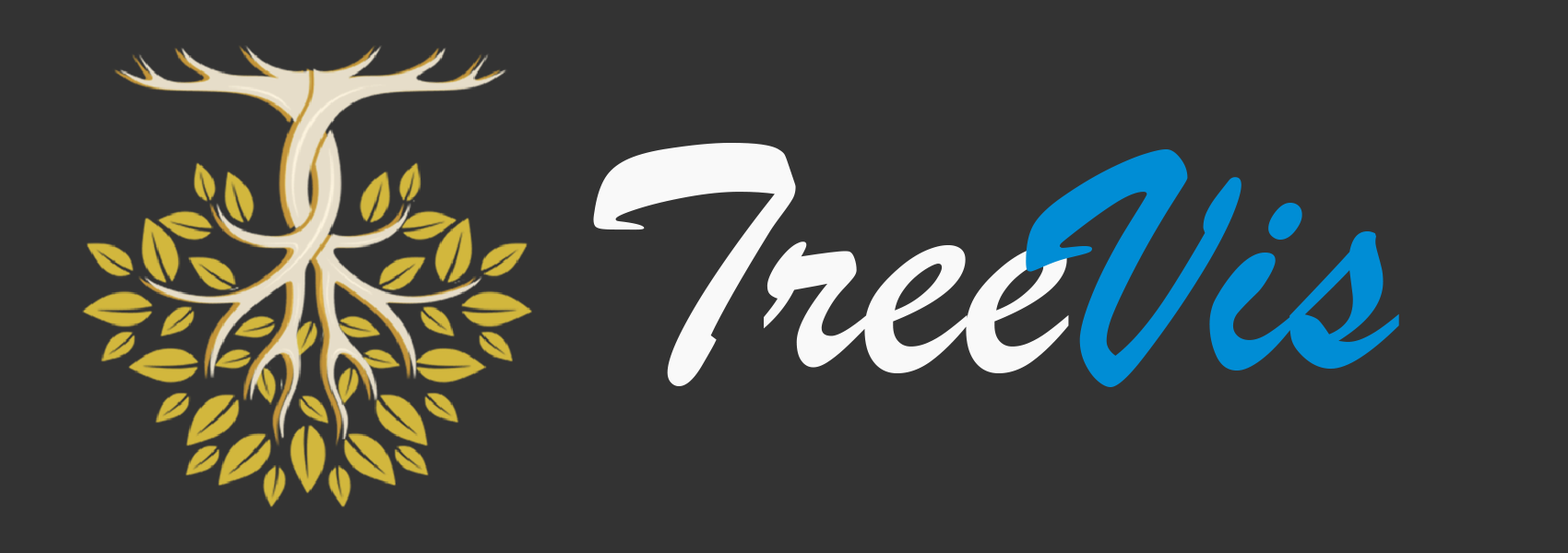
<style>
.page{position:relative;width:1568px;height:553px;background:#333333}
.page>*{position:absolute;margin:0}
.t1{font:345.9px "BrushScriptMT";color:#f9f9f9}
.t2{font:345.9px "BrushScriptMT";color:#008dd5}
</style>
<div class="page">
<p class="t1" style="left:593px;top:143px;width:806px;height:244px">Tree<span class="t2">Vis</span></p>
</div>
